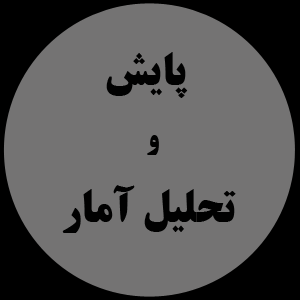
<style>
.page{position:relative;width:300px;height:300px;background:#747373}
.page>*{position:absolute;margin:0}
.t1{font:45px "BTitrBold";color:#010101}
.t2{font:30px "BTitrBold";color:#010101}
</style>
<div class="page">
<p class="t1" style="left:106px;top:52px;width:82px;height:46px">پايش</p>
<p class="t2" style="left:147px;top:135px;width:12px;height:20px">و</p>
<p class="t1" style="left:62px;top:185px;width:174px;height:48px">تحليل آمار</p>
</div>
